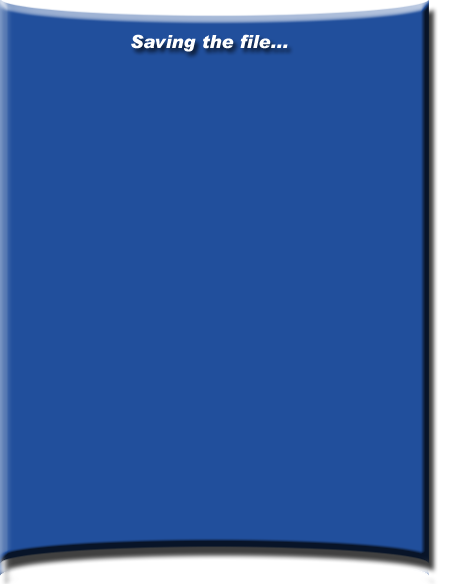
<style>
.page{position:relative;width:450px;height:584px;background:#214f9c}
.page>*{position:absolute;margin:0}
.t1{font:18px "Arial-BlackItalic";color:#ffffff}
</style>
<div class="page">
<p class="t1" style="left:131px;top:34px;width:157px;height:18px">Saving the file...</p>
</div>
